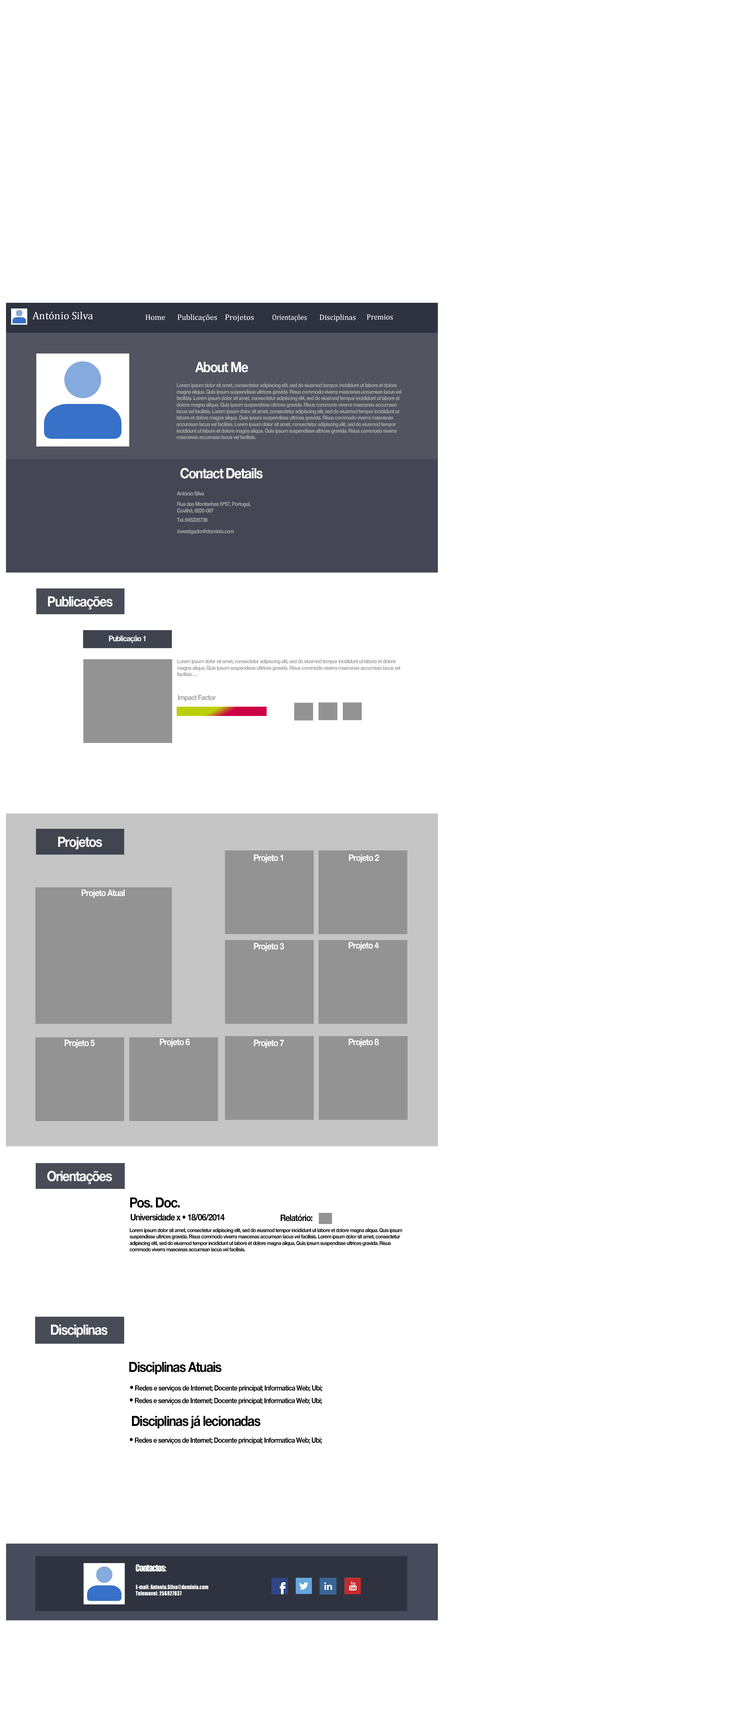
<style>
.page{position:relative;width:739px;height:1732px;background:#ffffff}
.page>*{position:absolute;margin:0}
.t1{font:10.8px "Cambria";color:#ffffff}
.t2{font:7.9px "Cambria";color:#ffffff}
.t3{font:7.9px "Cambria";color:#ffffff;scale:1.05 1}
.t4{font:7.8px "Cambria";color:#ffffff;scale:0.88 1}
.t5{font:7.8px "Cambria";color:#ffffff}
.t6{font:14.3px "HelveticaNeueLTStd-Bd";letter-spacing:-0.06em;color:#ffffff;scale:0.89 1}
.t7{font:5.4px "HelveticaNeueLTStd-Bd";letter-spacing:-0.06em;color:#a4a4a4;scale:0.89 1}
.t8{font:5.6px "HelveticaNeueLTStd-Bd";letter-spacing:-0.06em;color:#a3a3a3;scale:0.89 1}
.t9{font:14.1px "HelveticaNeueLTStd-Bd";letter-spacing:-0.06em;color:#ffffff;scale:0.89 1}
.t10{font:7.8px "HelveticaNeueLTStd-Bd";letter-spacing:-0.06em;color:#ffffff;scale:0.89 1}
.t11{font:7.2px "HelveticaNeueLTStd-Bd";letter-spacing:-0.06em;color:#a4a4a4;scale:0.89 1}
.t12{font:9px "HelveticaNeueLTStd-Bd";letter-spacing:-0.06em;color:#ffffff;scale:0.89 1}
.t13{font:14.1px "HelveticaNeueLTStd-Bd";letter-spacing:-0.06em;color:#000000;scale:0.89 1}
.t14{font:9.1px "HelveticaNeueLTStd-Bd";letter-spacing:-0.06em;color:#000000;scale:0.89 1}
.t15{font:9px "HelveticaNeueLTStd-Bd";letter-spacing:-0.06em;color:#000000;scale:0.89 1}
.t16{font:5.4px "HelveticaNeueLTStd-Bd";letter-spacing:-0.06em;color:#000000;scale:0.89 1}
.t17{font:7.2px "HelveticaNeueLTStd-Bd";letter-spacing:-0.06em;color:#000000;scale:0.89 1}
.t18{font:9px "Impact";letter-spacing:-0.06em;color:#fdfdfd;scale:0.89 1}
.t19{font:5.4px "Impact";letter-spacing:0.02em;color:#fdfdfd;scale:0.89 1}
</style>
<div class="page">
<p class="t1" style="left:32px;top:311px;width:61px;height:9px">António Silva</p>
<p class="t2" style="left:146px;top:314px;width:19px;height:6px">Home</p>
<p class="t2" style="left:178px;top:314px;width:39px;height:8px">Publicações</p>
<p class="t3" style="left:225px;top:314px;width:29px;height:8px">Projetos</p>
<p class="t4" style="left:272px;top:314px;width:35px;height:8px">Orientações</p>
<p class="t5" style="left:320px;top:314px;width:36px;height:8px">Disciplinas</p>
<p class="t5" style="left:367px;top:314px;width:26px;height:6px">Premios</p>
<p class="t6" style="left:195px;top:362px;width:53px;height:10px">About Me</p>
<p class="t7" style="left:176px;top:383px;width:225px;height:56px">Lorem ipsum dolor sit amet, consectetur adipiscing elit, sed do eiusmod tempor incididunt ut labore et dolore magna aliqua. Quis ipsum suspendisse ultrices gravida. Risus commodo viverra maecenas accumsan lacus vel facilisis. Lorem ipsum dolor sit amet, consectetur adipiscing elit, sed do eiusmod tempor incididunt ut labore et dolore magna aliqua. Quis ipsum suspendisse ultrices gravida. Risus commodo viverra maecenas accumsan lacus vel facilisis. Lorem ipsum dolor sit amet, consectetur adipiscing elit, sed do eiusmod tempor incididunt ut labore et dolore magna aliqua. Quis ipsum suspendisse ultrices gravida. Risus commodo viverra maecenas accumsan lacus vel facilisis. Lorem ipsum dolor sit amet, consectetur adipiscing elit, sed do eiusmod tempor incididunt ut labore et dolore magna aliqua. Quis ipsum suspendisse ultrices gravida. Risus commodo viverra maecenas accumsan lacus vel facilisis.</p>
<p class="t6" style="left:180px;top:468px;width:83px;height:10px">Contact Details</p>
<p class="t8" style="left:177px;top:491px;width:27px;height:5px">António Silva</p>
<p class="t8" style="left:177px;top:502px;width:74px;height:11px">Rua das Montanhas Nº57, Portugal, Covilhã, 6220-087</p>
<p class="t8" style="left:177px;top:518px;width:31px;height:4px">Tel.:945235736</p>
<p class="t8" style="left:177px;top:529px;width:57px;height:5px">investigador@dominio.com</p>
<p class="t9" style="left:48px;top:596px;width:65px;height:14px">Publicações</p>
<p class="t10" style="left:109px;top:635px;width:37px;height:8px">Publicação 1</p>
<p class="t7" style="left:177px;top:659px;width:223px;height:17px">Lorem ipsum dolor sit amet, consectetur adipiscing elit, sed do eiusmod tempor incididunt ut labore et dolore magna aliqua. Quis ipsum suspendisse ultrices gravida. Risus commodo viverra maecenas accumsan lacus vel facilisis. ...</p>
<p class="t11" style="left:178px;top:694px;width:38px;height:7px">Impact Factor</p>
<p class="t9" style="left:58px;top:836px;width:44px;height:13px">Projetos</p>
<p class="t12" style="left:254px;top:854px;width:29px;height:8px">Projeto 1</p>
<p class="t12" style="left:349px;top:854px;width:30px;height:8px">Projeto 2</p>
<p class="t12" style="left:82px;top:889px;width:43px;height:9px">Projeto Atual</p>
<p class="t12" style="left:349px;top:942px;width:30px;height:8px">Projeto 4</p>
<p class="t12" style="left:254px;top:943px;width:30px;height:8px">Projeto 3</p>
<p class="t12" style="left:64px;top:1039px;width:31px;height:9px">Projeto 5</p>
<p class="t12" style="left:160px;top:1038px;width:30px;height:9px">Projeto 6</p>
<p class="t12" style="left:254px;top:1039px;width:30px;height:9px">Projeto 7</p>
<p class="t12" style="left:349px;top:1038px;width:30px;height:9px">Projeto 8</p>
<p class="t9" style="left:47px;top:1170px;width:65px;height:14px">Orientações</p>
<p class="t13" style="left:130px;top:1197px;width:50px;height:11px">Pos. Doc.</p>
<p class="t14" style="left:130px;top:1214px;width:95px;height:6px">Universidade x • 18/06/2014</p>
<p class="t15" style="left:280px;top:1214px;width:33px;height:7px">Relatório:</p>
<p class="t16" style="left:130px;top:1228px;width:272px;height:23px">Lorem ipsum dolor sit amet, consectetur adipiscing elit, sed do eiusmod tempor incididunt ut labore et dolore magna aliqua. Quis ipsum suspendisse ultrices gravida. Risus commodo viverra maecenas accumsan lacus vel facilisis. Lorem ipsum dolor sit amet, consectetur adipiscing elit, sed do eiusmod tempor incididunt ut labore et dolore magna aliqua. Quis ipsum suspendisse ultrices gravida. Risus commodo viverra maecenas accumsan lacus vel facilisis.</p>
<p class="t9" style="left:51px;top:1324px;width:57px;height:13px">Disciplinas</p>
<p class="t13" style="left:129px;top:1361px;width:93px;height:13px">Disciplinas Atuais</p>
<p class="t17" style="left:130px;top:1385px;width:192px;height:7px"><span class="t15">• </span>Redes e serviços de Internet; Docente principal; Informatica Web; Ubi;</p>
<p class="t17" style="left:130px;top:1397px;width:192px;height:8px"><span class="t15">• </span>Redes e serviços de Internet; Docente principal; Informatica Web; Ubi;</p>
<p class="t13" style="left:132px;top:1415px;width:128px;height:13px">Disciplinas já lecionadas</p>
<p class="t17" style="left:130px;top:1437px;width:192px;height:7px"><span class="t15">• </span>Redes e serviços de Internet; Docente principal; Informatica Web; Ubi;</p>
<p class="t18" style="left:136px;top:1564px;width:30px;height:7px">Contactos:</p>
<p class="t19" style="left:136px;top:1584px;width:72px;height:11px">E-mail: Antonio.Silva@dominio.com<br>Telemovel: 256827637</p>
</div>
